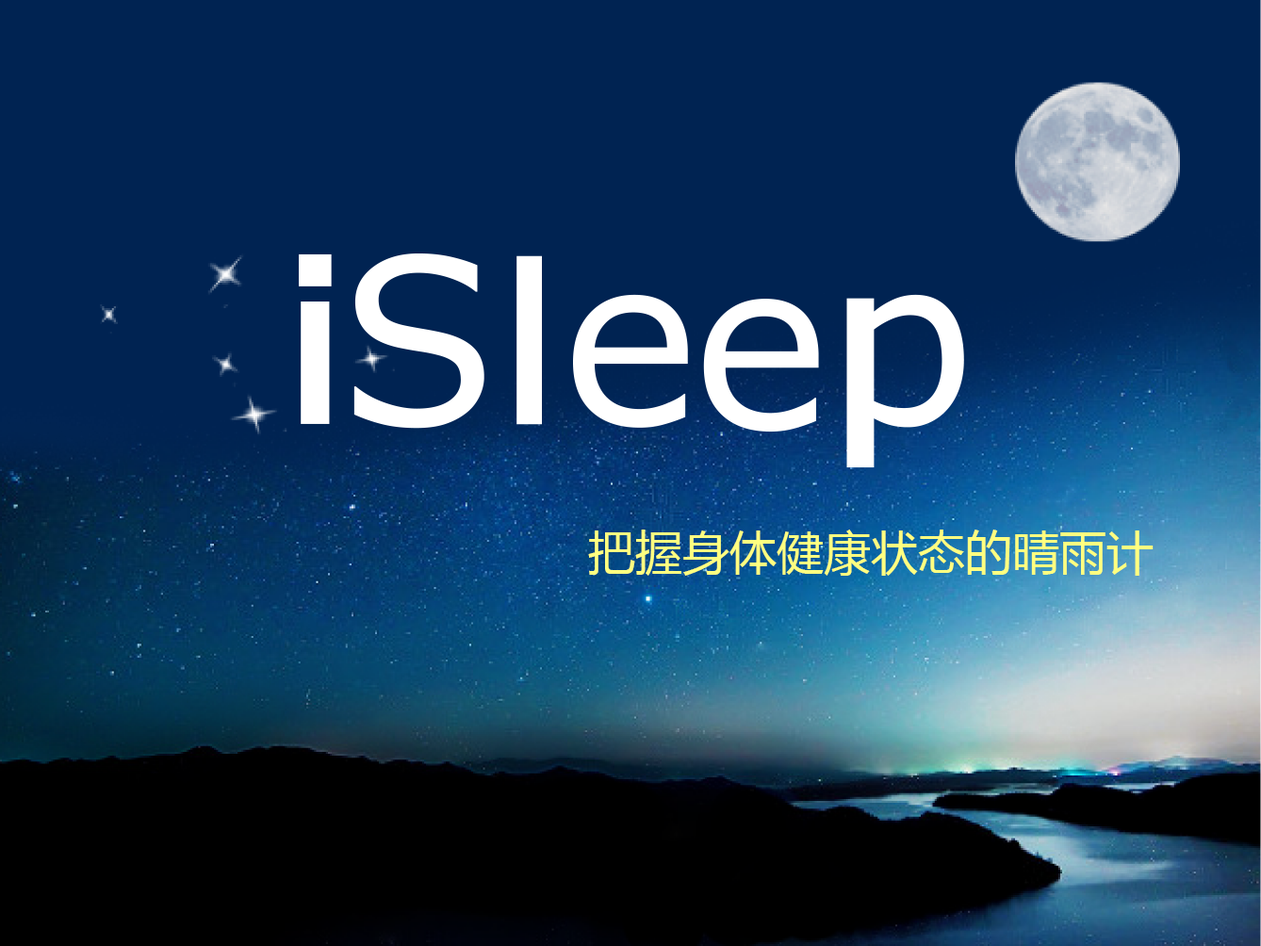
<style>
.page{position:relative;width:1261px;height:946px;background:#002352}
.page>*{position:absolute;margin:0}
.t1{font:47.1px "MicrosoftYaHei";color:#ffff80}
</style>
<div class="page">
<p class="t1" style="left:588px;top:529px;width:565px;height:47px">把握身体健康状态的晴雨计</p>
</div>
